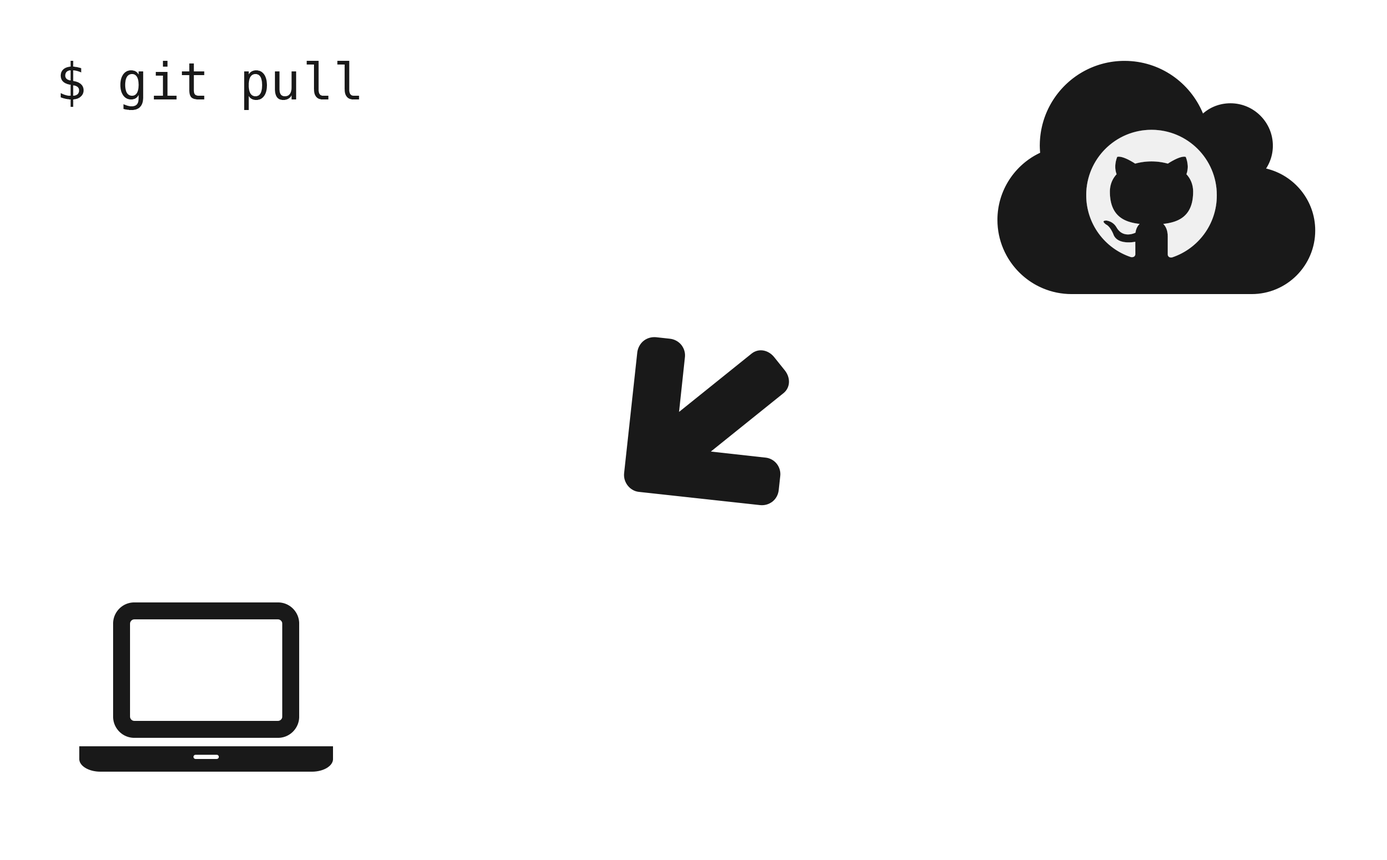
<style>
.page{position:relative;width:1387px;height:860px;background:#ffffff}
.page>*{position:absolute;margin:0}
.t1{font:50.8px "Menlo-Regular";color:#191919}
</style>
<div class="page">
<p class="t1" style="left:60px;top:61px;width:299px;height:49px">$ git pull</p>
</div>
